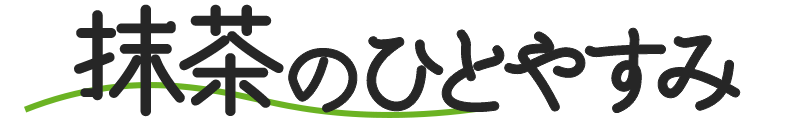
<style>
.page{position:relative;width:800px;height:120px;background:#ffffff}
.page>*{position:absolute;margin:0}
.t1{font:120px "TA-kotodama_r";color:#262626;font-weight:bold}
.t2{font:105px "TA-kotodama_r";color:#262626;font-weight:bold}
.t3{font:95px "TA-kotodama_r";color:#262626;font-weight:bold}
</style>
<div class="page">
<p class="t1" style="left:74px;top:4px;width:210px;height:113px">抹茶</p>
<p class="t2" style="left:288px;top:28px;width:452px;height:85px"><span class="t3">の</span>ひとやすみ</p>
</div>
